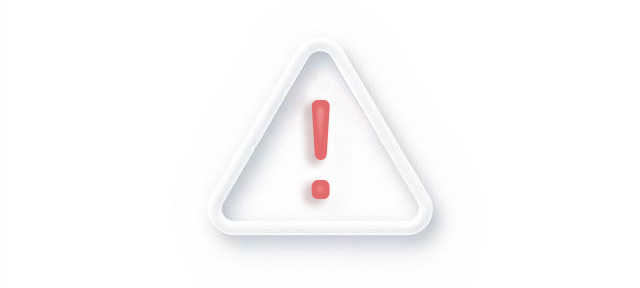
<style>
.page{position:relative;width:640px;height:288px;background:#ffffff}
.page>*{position:absolute;margin:0}
.t1{font:152.5px "OCRAExtended";color:#e36d6e;scale:0.95 1}
</style>
<div class="page">
<p class="t1" style="left:311px;top:100px;width:19px;height:99px">!</p>
</div>
